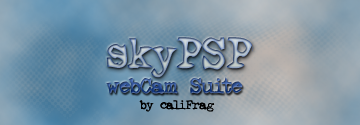
<style>
.page{position:relative;width:360px;height:125px}
.page>*{position:absolute;margin:0}
.t1{font:48px "Ghostwriter"}
.t2{font:24px "Ghostwriter"}
.t3{font:14px "Ghostwriter";color:#000000}
</style>
<div class="page">
<p class="t1" style="left:106px;top:37px;width:148px;height:41px">skyPSP</p>
<p class="t2" style="left:106px;top:77px;width:137px;height:17px">webCam Suite</p>
<p class="t3" style="left:139px;top:100px;width:76px;height:12px">by caliFrag</p>
</div>
